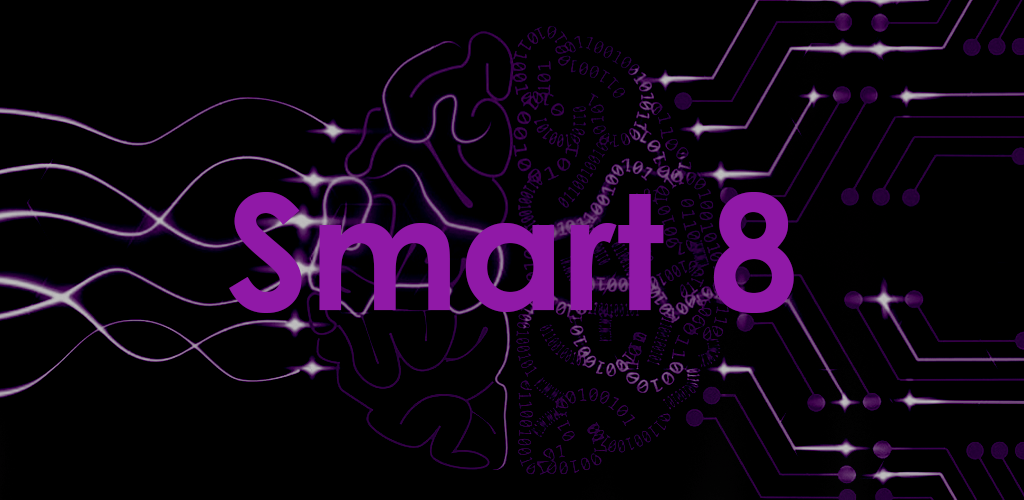
<style>
.page{position:relative;width:1024px;height:500px;background:#000000}
.page>*{position:absolute;margin:0}
.t1{font:160px "CenturyGothic-Bold";color:#9019a7}
</style>
<div class="page">
<p class="t1" style="left:229px;top:192px;width:565px;height:121px">Smart 8</p>
</div>
